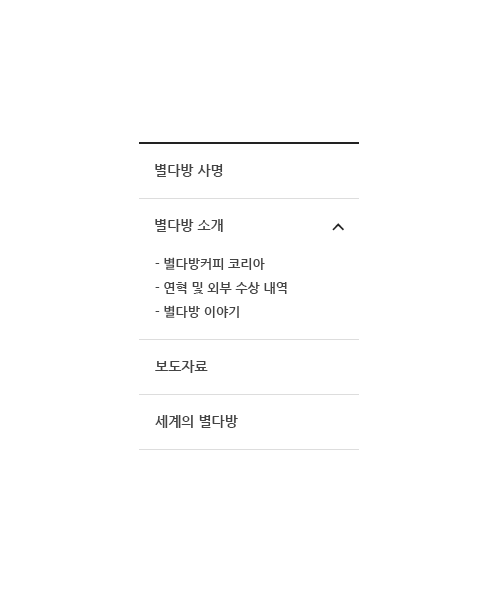
<style>
.page{position:relative;width:500px;height:600px;background:#ffffff}
.page>*{position:absolute;margin:0}
.t1{font:14px "NanumGothicBold";color:#444444}
.t2{font:13px/24px "NanumGothicBold";color:#444444}
</style>
<div class="page">
<p class="t1" style="left:155px;top:164px;width:68px;height:13px">별다방 사명</p>
<p class="t1" style="left:155px;top:219px;width:68px;height:13px">별다방 소개</p>
<p class="t2" style="left:155px;top:257px;width:132px;height:61px">- 별다방커피 코리아<br>- 연혁 및 외부 수상 내역<br>- 별다방 이야기</p>
<p class="t1" style="left:155px;top:360px;width:53px;height:13px">보도자료</p>
<p class="t1" style="left:155px;top:415px;width:83px;height:13px">세계의 별다방</p>
</div>
